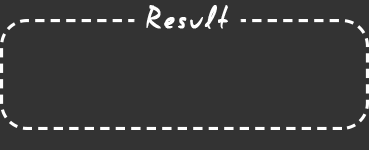
<style>
.page{position:relative;width:369px;height:150px;background:#333333}
.page>*{position:absolute;margin:0}
.t1{font:30.1px "PFScandalPro-Black";letter-spacing:0.1em;color:#ffffff;font-weight:bold;scale:0.63 1}
</style>
<div class="page">
<p class="t1" style="left:146px;top:5px;width:82px;height:24px">Result</p>
</div>
